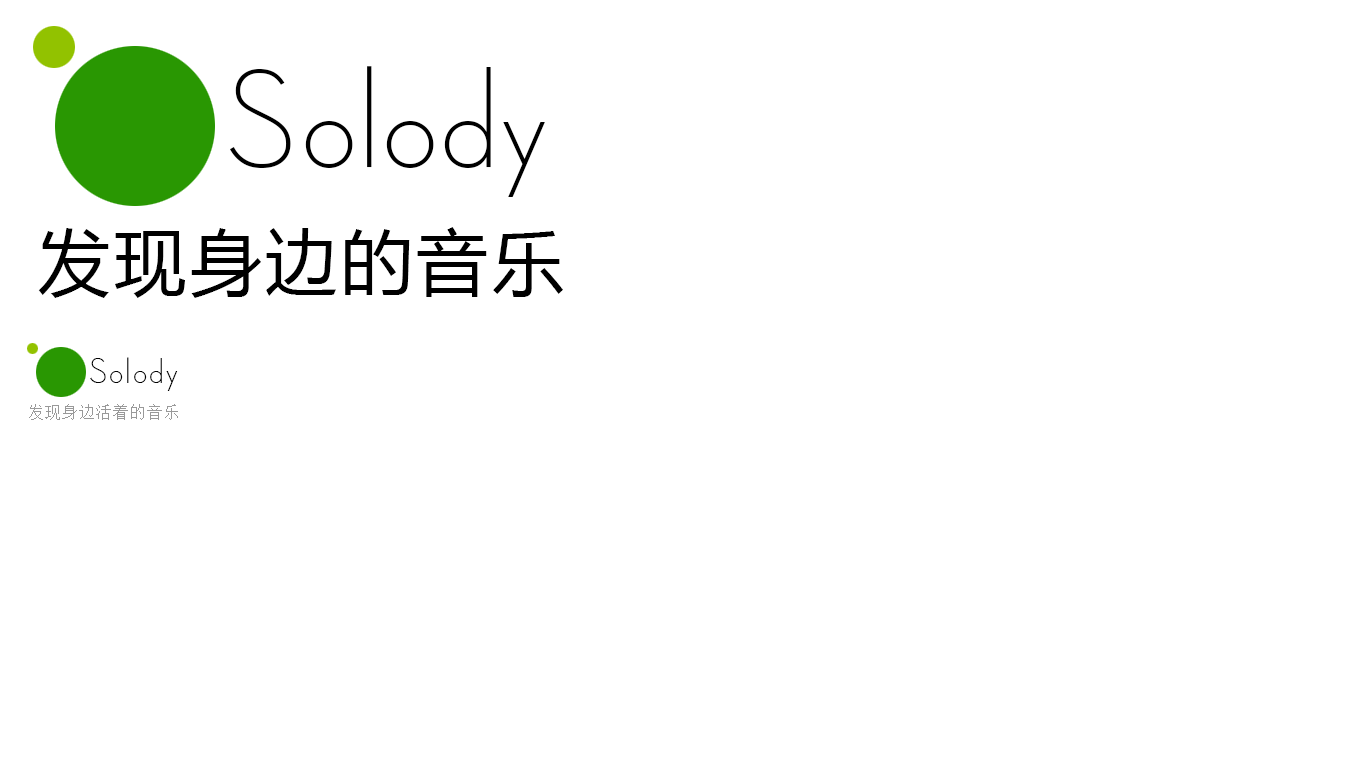
<style>
.page{position:relative;width:1366px;height:768px;background:#ffffff}
.page>*{position:absolute;margin:0}
.t1{font:142px "ADELE-Light";letter-spacing:0.01em;color:#000000}
.t2{font:72px "MicrosoftYaHei";letter-spacing:0.05em;color:#000000}
.t3{font:36px "ADELE-Light";letter-spacing:0.05em;color:#000000}
.t4{font:16px "SimSun";letter-spacing:0.07em;color:#999999}
</style>
<div class="page">
<p class="t1" style="left:230px;top:66px;width:315px;height:131px">Solody</p>
<p class="t2" style="left:38px;top:227px;width:525px;height:71px">发现身边的音乐</p>
<p class="t3" style="left:90px;top:357px;width:88px;height:34px">Solody</p>
<p class="t4" style="left:29px;top:404px;width:149px;height:16px">发现身边活着的音乐</p>
</div>
